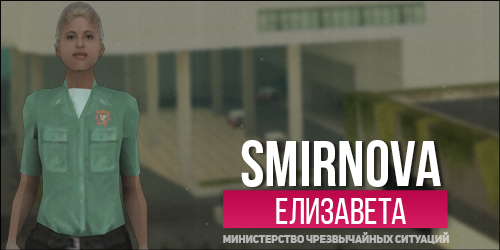
<style>
.page{position:relative;width:500px;height:250px}
.page>*{position:absolute;margin:0}
.t1{font:64.4px "BebasNeueBold";color:#ffffff}
.t2{font:36.8px "BebasNeueRegular";color:#ffffff}
.t3{font:10.6px "UniSansHeavyCaps";color:#b5b5b3}
</style>
<div class="page">
<p class="t1" style="left:241px;top:140px;width:200px;height:47px">smirnova</p>
<p class="t2" style="left:276px;top:198px;width:130px;height:26px">ЕЛИЗАВЕТА</p>
<p class="t3" style="left:223px;top:232px;width:226px;height:12px">МИНИСТЕРСТВО ЧРЕЗВЫЧАЙНЫХ СИТУАЦИЙ</p>
</div>
